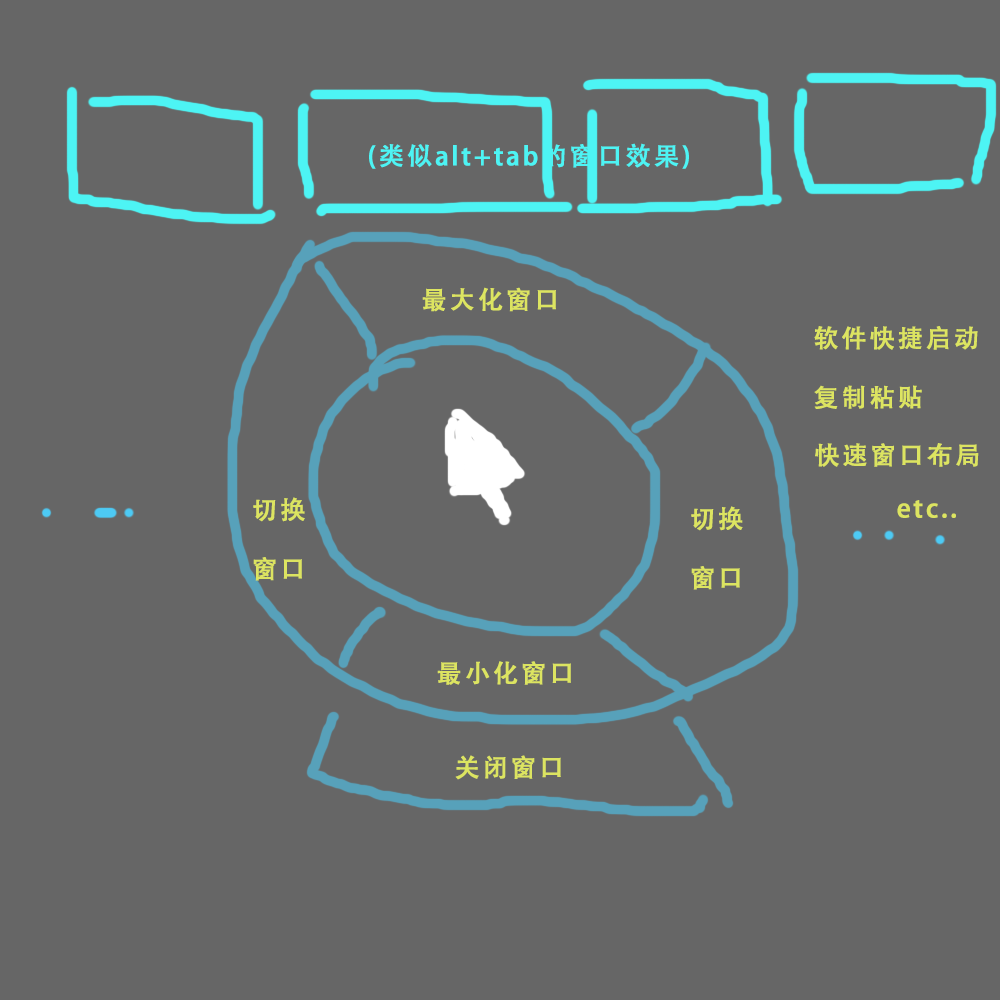
<style>
.page{position:relative;width:1000px;height:1000px;background:#666666}
.page>*{position:absolute;margin:0}
.t1{font:25px "AdobeHeitiStd-Regular";letter-spacing:0.1em;color:#4df4f4;font-weight:bold}
.t2{font:25px "AdobeHeitiStd-Regular";letter-spacing:0.1em;color:#dce461;font-weight:bold}
.t3{font:25px/59.2px "AdobeHeitiStd-Regular";letter-spacing:0.1em;color:#dce461;font-weight:bold}
</style>
<div class="page">
<p class="t1" style="left:369px;top:143px;width:320px;height:26px">(类似alt+tab的窗口效果)</p>
<p class="t2" style="left:422px;top:287px;width:134px;height:25px">最大化窗口</p>
<p class="t3" style="left:814px;top:326px;width:164px;height:83px">软件快捷启动<br>复制粘贴</p>
<p class="t2" style="left:815px;top:443px;width:164px;height:24px">快速窗口布局</p>
<p class="t3" style="left:253px;top:497px;width:52px;height:84px">切换<br>窗口</p>
<p class="t3" style="left:691px;top:506px;width:52px;height:84px">切换<br>窗口</p>
<p class="t2" style="left:897px;top:500px;width:59px;height:18px">etc..</p>
<p class="t2" style="left:437px;top:661px;width:134px;height:24px">最小化窗口</p>
<p class="t2" style="left:455px;top:755px;width:106px;height:25px">关闭窗口</p>
</div>
